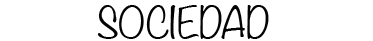
<style>
.page{position:relative;width:373px;height:41px;background:#ffffff}
.page>*{position:absolute;margin:0}
.t1{font:38.6px "Noteworthy-Light";color:#030303}
</style>
<div class="page">
<p class="t1" style="left:98px;top:5px;width:171px;height:34px">SOCIEDAD</p>
</div>
